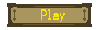
<style>
.page{position:relative;width:100px;height:30px;background:#ffffff}
.page>*{position:absolute;margin:0}
.t1{font:12.5px "KarmaSuture-Regular";color:#f8e40a}
</style>
<div class="page">
<p class="t1" style="left:41px;top:9px;width:24px;height:13px">Play</p>
</div>
